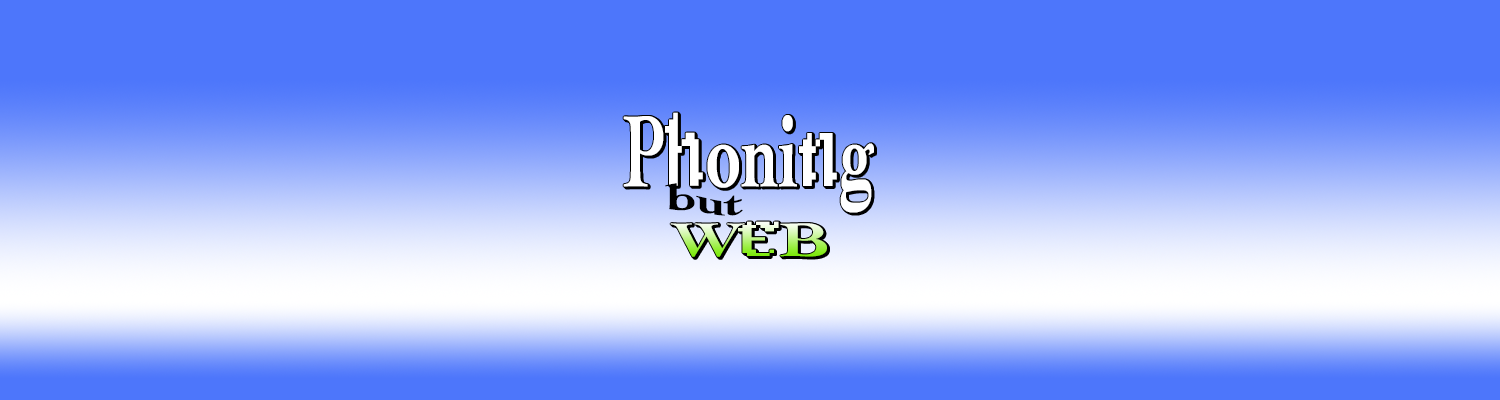
<style>
.page{position:relative;width:1500px;height:400px;background:#4d76fb}
.page>*{position:absolute;margin:0}
.t1{font:106.1px "Cochin-Bold";color:#ffffff;scale:0.63 1}
.t2{font:106.1px "Alagard";color:#ffffff;scale:0.63 1}
.t3{font:40px "Cochin-Bold";color:#000000;scale:1.34 1}
.t4{font:49.7px "Cochin-Bold";letter-spacing:-0.06em;scale:1.45 1}
.t5{font:49.7px "Alagard";letter-spacing:-0.06em;scale:1.45 1}
</style>
<div class="page">
<p class="t1" style="left:623px;top:112px;width:251px;height:101px">P<span class="t2">h</span>oni<span class="t2">n</span>g</p>
<p class="t3" style="left:665px;top:183px;width:78px;height:33px">but</p>
<p class="t4" style="left:670px;top:221px;width:157px;height:36px">W<span class="t5">E</span>B</p>
</div>
